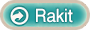
<style>
.page{position:relative;width:90px;height:30px}
.page>*{position:absolute;margin:0}
.t1{font:18px "FutoGoB101Pr5-Bold";letter-spacing:-0.04em;color:#ffffff}
</style>
<div class="page">
<p class="t1" style="left:36px;top:8px;width:37px;height:15px">Rakit</p>
</div>
